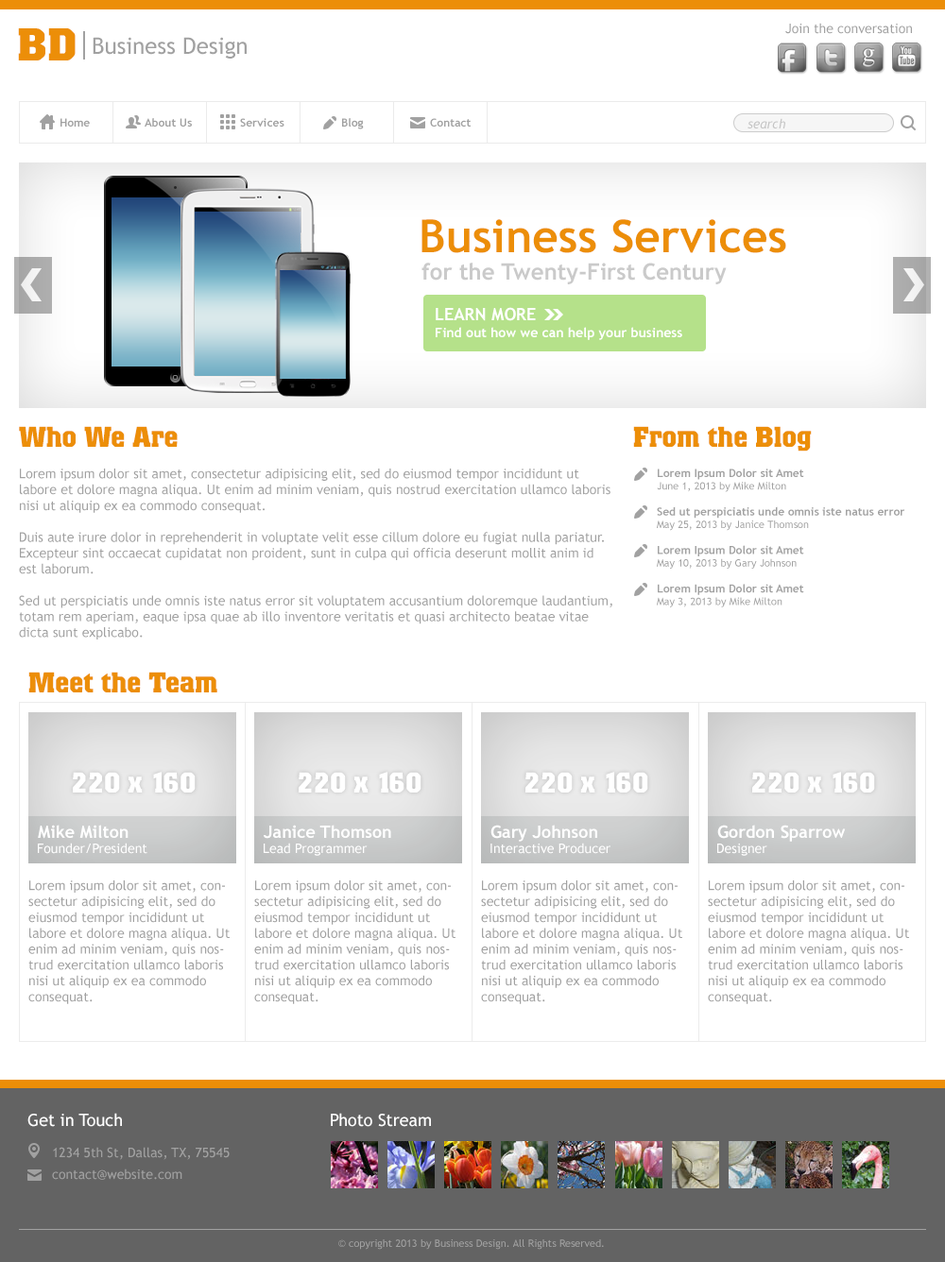
<style>
.page{position:relative;width:945px;height:1262px;background:#ffffff}
.page>*{position:absolute;margin:0}
.t1{font:45.3px "Colossalis-Bold";color:#ec8e08}
.t2{font:13.2px "TrebuchetMS";color:#a1a1a1}
.t3{font:22.7px "TrebuchetMS";color:#a1a1a1}
.t4{font:11.3px "TrebuchetMS-Bold";color:#a1a1a1}
.t5{font:13.2px "TrebuchetMS-Italic";color:#c5c5c5}
.t6{font:45.3px "TrebuchetMS-Bold";color:#ec8e08}
.t7{font:22.7px "TrebuchetMS-Bold";color:#cacaca}
.t8{font:17px "TrebuchetMS-Bold";color:#ffffff}
.t9{font:13.2px "TrebuchetMS-Bold";color:#ffffff}
.t10{font:28.3px "Colossalis-Bold";color:#ec8e08}
.t11{font:10.4px "TrebuchetMS";color:#a1a1a1}
.t12{font:28.3px "Colossalis-Bold";color:#ffffff}
.t13{font:13.2px "TrebuchetMS";color:#ffffff}
.t14{font:17px "TrebuchetMS";color:#ffffff}
</style>
<div class="page">
<p class="t1" style="left:18px;top:28px;width:58px;height:32px">BD</p>
<p class="t2" style="left:785px;top:23px;width:127px;height:11px">Join the conversation</p>
<p class="t3" style="left:93px;top:37px;width:154px;height:22px">Business Design</p>
<p class="t4" style="left:60px;top:118px;width:30px;height:9px">Home</p>
<p class="t4" style="left:145px;top:118px;width:47px;height:9px">About Us</p>
<p class="t4" style="left:240px;top:118px;width:44px;height:9px">Services</p>
<p class="t4" style="left:342px;top:118px;width:22px;height:11px">Blog</p>
<p class="t4" style="left:430px;top:118px;width:40px;height:9px">Contact</p>
<p class="t5" style="left:747px;top:118px;width:38px;height:10px">search</p>
<p class="t6" style="left:421px;top:219px;width:365px;height:34px">Business Services</p>
<p class="t7" style="left:421px;top:263px;width:306px;height:21px">for the Twenty-First Century</p>
<p class="t8" style="left:436px;top:307px;width:100px;height:14px">LEARN MORE</p>
<p class="t9" style="left:436px;top:327px;width:246px;height:13px">Find out how we can help your business</p>
<p class="t10" style="left:19px;top:426px;width:159px;height:21px">Who We Are</p>
<p class="t10" style="left:633px;top:426px;width:179px;height:26px">From the Blog</p>
<p class="t2" style="left:19px;top:469px;width:593px;height:171px">Lorem ipsum dolor sit amet, consectetur adipisicing elit, sed do eiusmod tempor incididunt ut labore et dolore magna aliqua. Ut enim ad minim veniam, quis nostrud exercitation ullamco laboris nisi ut aliquip ex ea commodo consequat.<br><br>Duis aute irure dolor in reprehenderit in voluptate velit esse cillum dolore eu fugiat nulla pariatur. Excepteur sint occaecat cupidatat non proident, sunt in culpa qui officia deserunt mollit anim id est laborum.<br><br>Sed ut perspiciatis unde omnis iste natus error sit voluptatem accusantium doloremque laudantium, totam rem aperiam, eaque ipsa quae ab illo inventore veritatis et quasi architecto beatae vitae dicta sunt explicabo.</p>
<p class="t4" style="left:657px;top:469px;width:248px;height:138px">Lorem Ipsum Dolor sit Amet<br><span class="t11">June 1, 2013 by Mike Milton<br><br></span>Sed ut perspiciatis unde omnis iste natus error<br><span class="t11">May 25, 2013 by Janice Thomson<br><br></span>Lorem Ipsum Dolor sit Amet<br><span class="t11">May 10, 2013 by Gary Johnson<br><br></span>Lorem Ipsum Dolor sit Amet<br><span class="t11">May 3, 2013 by Mike Milton</span></p>
<p class="t10" style="left:28px;top:672px;width:189px;height:20px">Meet the Team</p>
<p class="t12" style="left:73px;top:772px;width:123px;height:21px">220 x 160</p>
<p class="t12" style="left:299px;top:772px;width:122px;height:21px">220 x 160</p>
<p class="t12" style="left:525px;top:772px;width:123px;height:21px">220 x 160</p>
<p class="t12" style="left:752px;top:772px;width:123px;height:21px">220 x 160</p>
<p class="t8" style="left:38px;top:825px;width:90px;height:14px">Mike Milton</p>
<p class="t8" style="left:264px;top:825px;width:127px;height:14px">Janice Thomson</p>
<p class="t8" style="left:490px;top:825px;width:107px;height:17px">Gary Johnson</p>
<p class="t8" style="left:717px;top:825px;width:129px;height:17px">Gordon Sparrow</p>
<p class="t13" style="left:38px;top:843px;width:109px;height:11px">Founder/President</p>
<p class="t13" style="left:264px;top:843px;width:104px;height:13px">Lead Programmer</p>
<p class="t13" style="left:490px;top:843px;width:120px;height:11px">Interactive Producer</p>
<p class="t13" style="left:717px;top:844px;width:50px;height:12px">Designer</p>
<p class="t2" style="left:28px;top:881px;width:202px;height:123px">Lorem ipsum dolor sit amet, consectetur adipisicing elit, sed do eiusmod tempor incididunt ut labore et dolore magna aliqua. Ut enim ad minim veniam, quis nostrud exercitation ullamco laboris nisi ut aliquip ex ea commodo consequat.</p>
<p class="t2" style="left:254px;top:881px;width:201px;height:123px">Lorem ipsum dolor sit amet, consectetur adipisicing elit, sed do eiusmod tempor incididunt ut labore et dolore magna aliqua. Ut enim ad minim veniam, quis nostrud exercitation ullamco laboris nisi ut aliquip ex ea commodo consequat.</p>
<p class="t2" style="left:481px;top:881px;width:201px;height:123px">Lorem ipsum dolor sit amet, consectetur adipisicing elit, sed do eiusmod tempor incididunt ut labore et dolore magna aliqua. Ut enim ad minim veniam, quis nostrud exercitation ullamco laboris nisi ut aliquip ex ea commodo consequat.</p>
<p class="t2" style="left:708px;top:881px;width:201px;height:123px">Lorem ipsum dolor sit amet, consectetur adipisicing elit, sed do eiusmod tempor incididunt ut labore et dolore magna aliqua. Ut enim ad minim veniam, quis nostrud exercitation ullamco laboris nisi ut aliquip ex ea commodo consequat.</p>
<p class="t14" style="left:27px;top:1113px;width:95px;height:14px">Get in Touch</p>
<p class="t14" style="left:331px;top:1113px;width:100px;height:14px">Photo Stream</p>
<p class="t2" style="left:53px;top:1147px;width:177px;height:13px">1234 5th St, Dallas, TX, 75545</p>
<p class="t2" style="left:52px;top:1169px;width:130px;height:11px">contact@website.com</p>
<p class="t11" style="left:338px;top:1240px;width:266px;height:10px">© copyright 2013 by Business Design. All Rights Reserved.</p>
</div>
